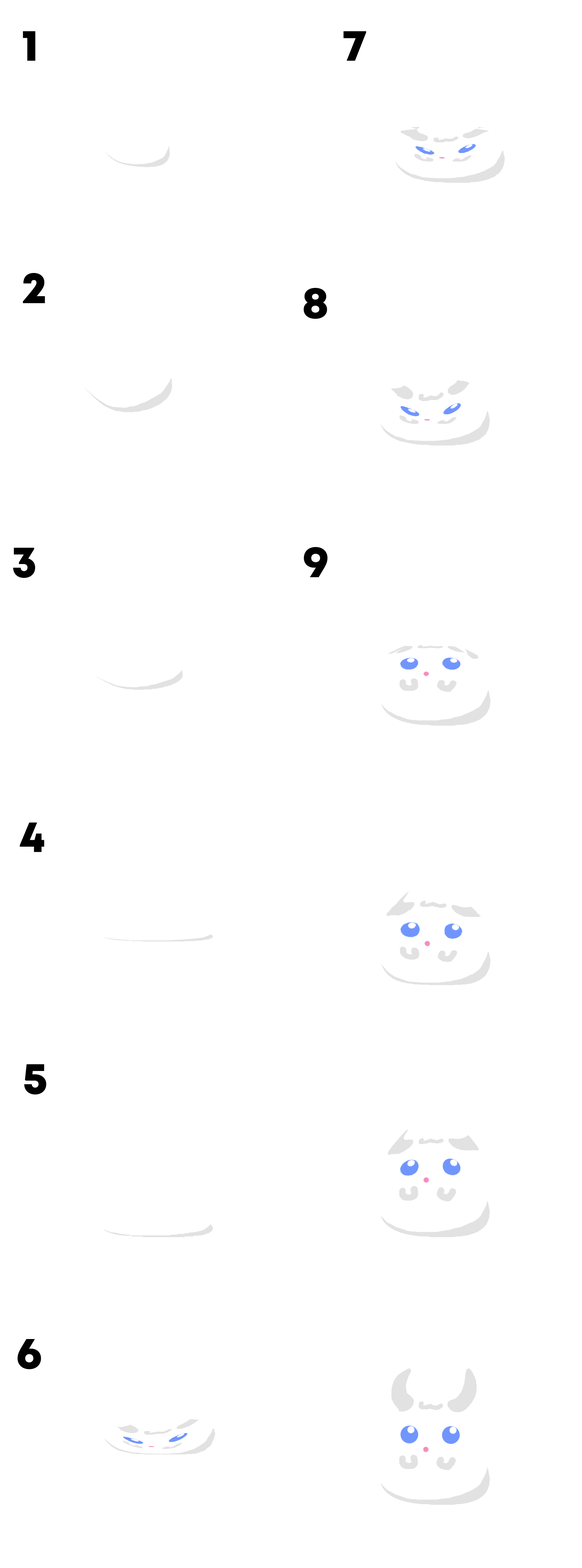
<style>
.page{position:relative;width:582px;height:1568px;background:#ffffff}
.page>*{position:absolute;margin:0}
.t1{font:44.4px "Mont-HeavyDEMO";color:#000000}
</style>
<div class="page">
<p class="t1" style="left:23px;top:31px;width:12px;height:30px">1</p>
<p class="t1" style="left:344px;top:31px;width:22px;height:30px">7</p>
<p class="t1" style="left:23px;top:273px;width:22px;height:30px">2</p>
<p class="t1" style="left:304px;top:288px;width:23px;height:31px">8</p>
<p class="t1" style="left:13px;top:547px;width:22px;height:31px">3</p>
<p class="t1" style="left:304px;top:547px;width:24px;height:30px">9</p>
<p class="t1" style="left:20px;top:823px;width:24px;height:29px">4</p>
<p class="t1" style="left:24px;top:1064px;width:23px;height:31px">5</p>
<p class="t1" style="left:17px;top:1339px;width:24px;height:30px">6</p>
</div>
